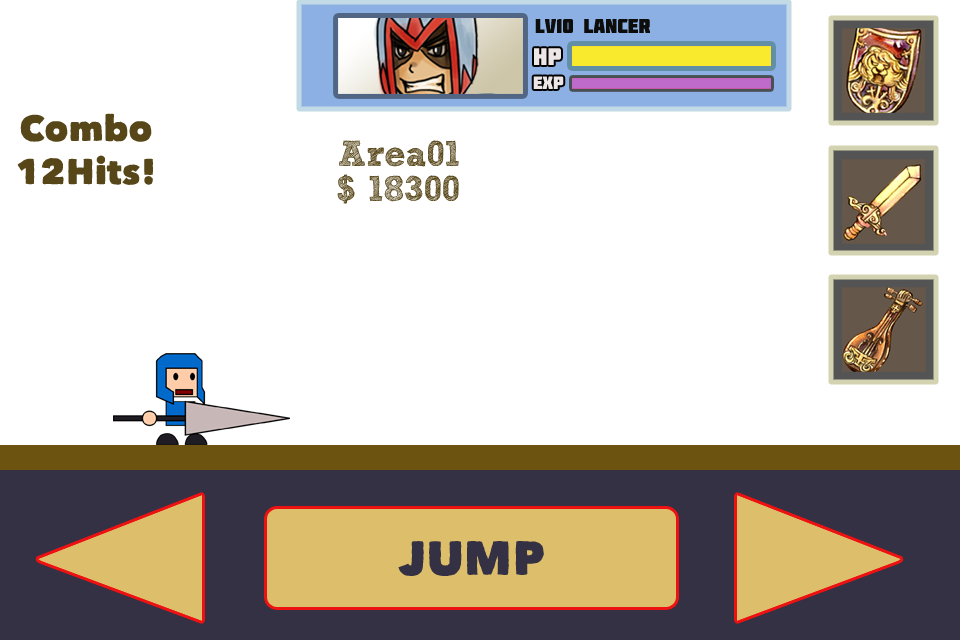
<style>
.page{position:relative;width:960px;height:640px;background:#ffffff}
.page>*{position:absolute;margin:0}
.t1{font:20px "Molot";color:#0d0d0c}
.t2{font:24px "Molot";color:#ede6e6}
.t3{font:18px "Molot";color:#ede6e6}
.t4{font:36px "Matiz";color:#574618}
.t5{font:36px "SketchRockwell";color:#574618}
.t6{font:48px "Matiz";color:#343145}
</style>
<div class="page">
<p class="t1" style="left:535px;top:19px;width:115px;height:14px">Lv10 lancer</p>
<p class="t2" style="left:534px;top:48px;width:27px;height:17px">HP</p>
<p class="t3" style="left:533px;top:76px;width:31px;height:13px">exp</p>
<p class="t4" style="left:17px;top:113px;width:136px;height:72px;text-align:center">Combo<br>12Hits!</p>
<p class="t5" style="left:339px;top:140px;width:120px;height:27px">Area01</p>
<p class="t5" style="left:337px;top:174px;width:122px;height:30px">$ 18300</p>
<p class="t6" style="left:398px;top:541px;width:146px;height:35px">JUMP</p>
</div>
